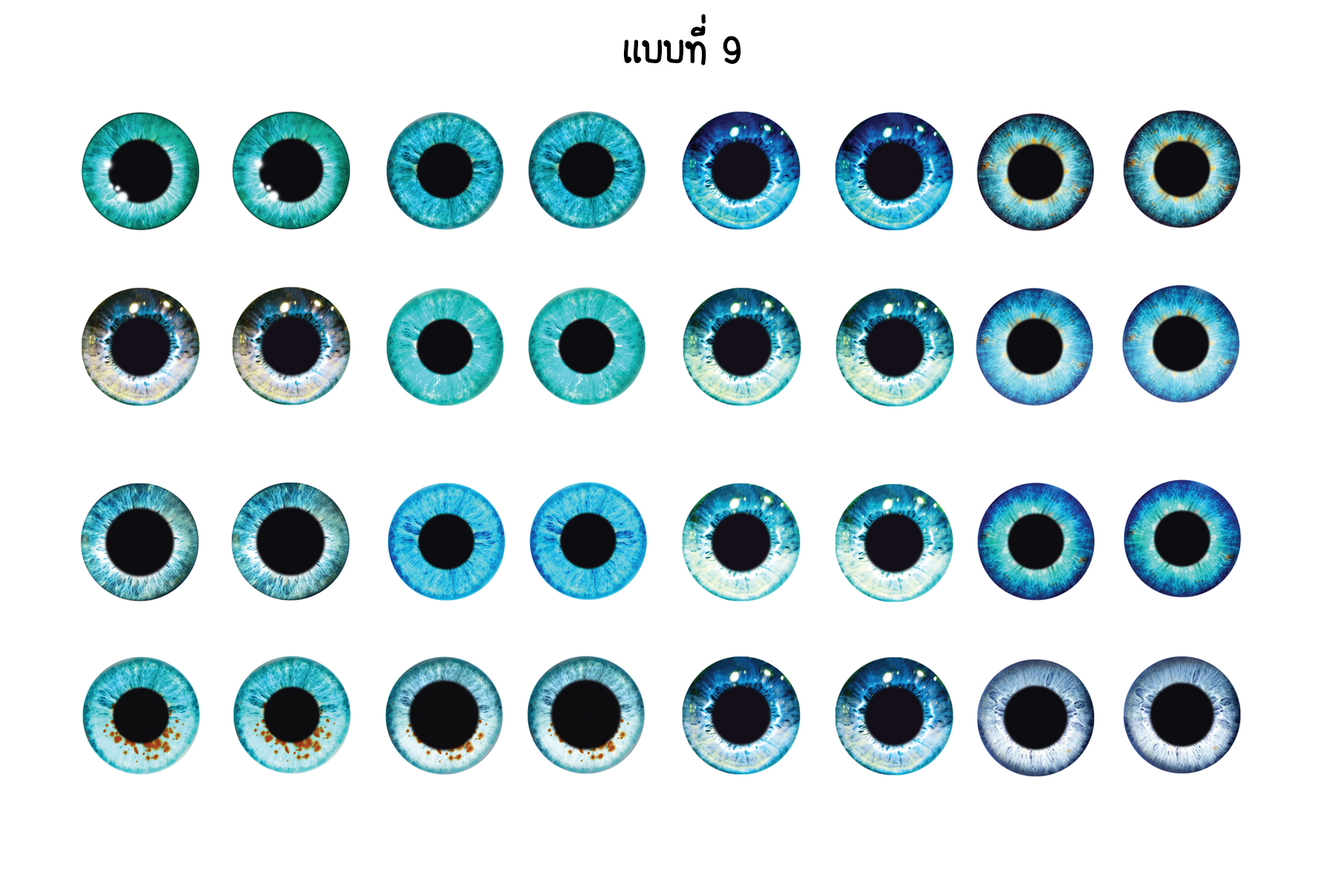
<style>
.page{position:relative;width:1337px;height:892px;background:#ffffff}
.page>*{position:absolute;margin:0}
.t1{font:55.7px "FCDaisyRegular";color:#000000}
</style>
<div class="page">
<p class="t1" style="left:623px;top:14px;width:119px;height:51px">เเบบที่ 9</p>
</div>
